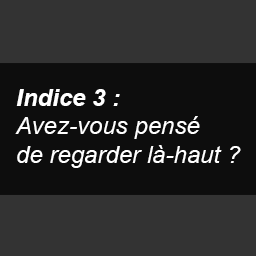
<style>
.page{position:relative;width:256px;height:256px;background:#333333}
.page>*{position:absolute;margin:0}
.t1{font:24px "Arial-ItalicMT";color:#ffffff}
.t2{font:24px "Arial-BoldItalicMT";color:#ffffff}
</style>
<div class="page">
<p class="t1" style="left:15px;top:89px;width:226px;height:79px"><span class="t2">Indice 3 :<br></span>Avez-vous pensé<br>de regarder là-haut ?</p>
</div>
